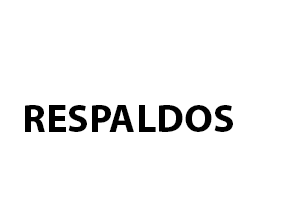
<style>
.page{position:relative;width:300px;height:200px;background:#ffffff}
.page>*{position:absolute;margin:0}
.t1{font:40px "MyriadPro-Bold";color:#000000}
</style>
<div class="page">
<p class="t1" style="left:25px;top:105px;width:208px;height:27px">RESPALDOS</p>
</div>
